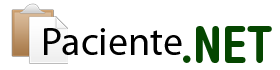
<style>
.page{position:relative;width:280px;height:70px;background:#ffffff}
.page>*{position:absolute;margin:0}
.t1{font:40px "MyriadPro-Regular";color:#000000}
.t2{font:50px "HelveticaRoundedLTStd-BdCn";color:#054600}
</style>
<div class="page">
<p class="t1" style="left:44px;top:28px;width:138px;height:27px">Paciente</p>
<p class="t2" style="left:183px;top:26px;width:89px;height:37px">.NET</p>
</div>
